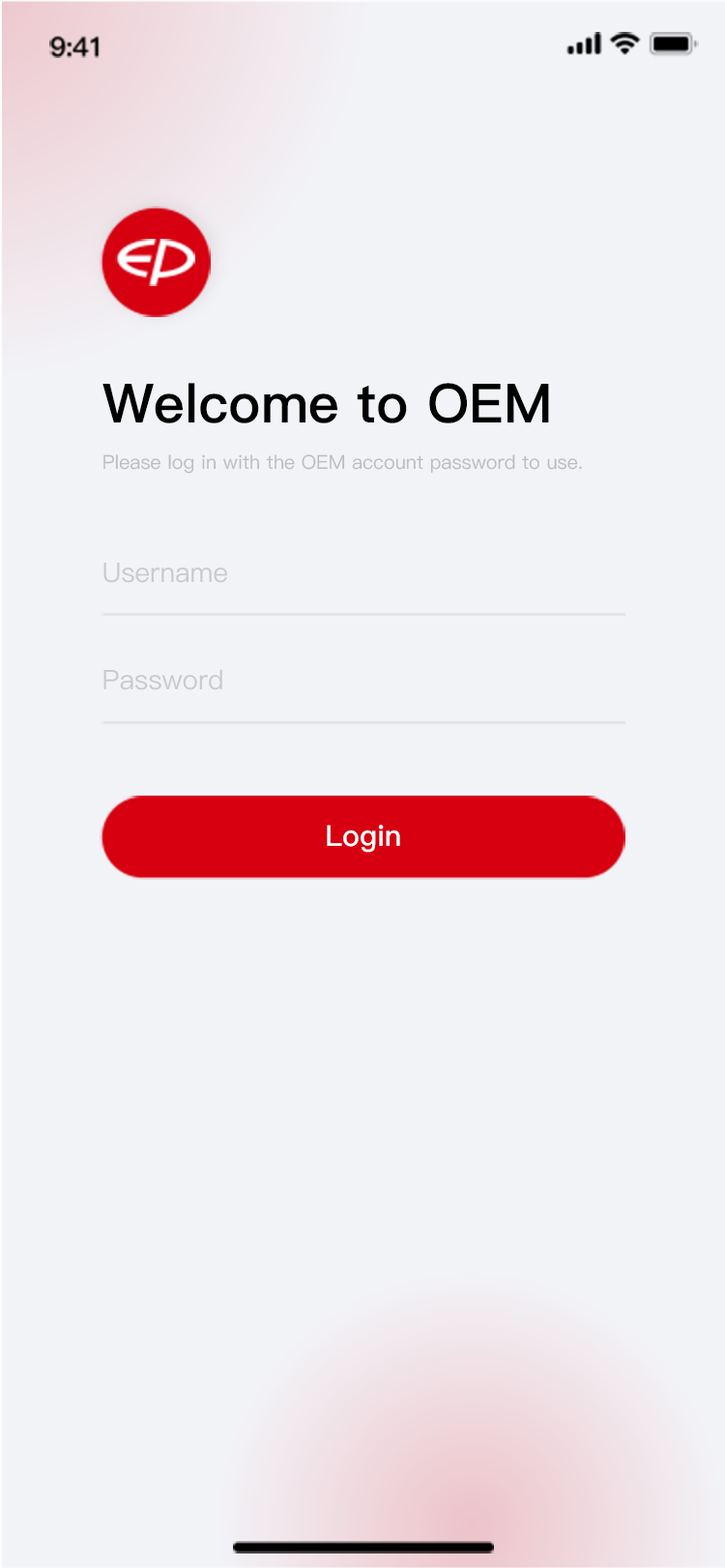
<style>
.page{position:relative;width:725px;height:1568px;background:#f2f3f7}
.page>*{position:absolute;margin:0}
.t1{font:54px "PingFang-SC-Heavy";color:#000000}
.t2{font:19.3px "PingFang-SC-Medium";color:#bdbdbd}
.t3{font:27px "PingFang-SC-Medium";color:#c9cacd}
.t4{font:28.9px "PingFang-SC-Bold";color:#ffffff}
</style>
<div class="page">
<p class="t1" style="left:102px;top:383px;width:447px;height:40px">Welcome to OEM</p>
<p class="t2" style="left:103px;top:454px;width:479px;height:20px">Please log in with the OEM account password to use.</p>
<p class="t3" style="left:103px;top:563px;width:124px;height:20px">Username</p>
<p class="t3" style="left:103px;top:669px;width:119px;height:21px">Password</p>
<p class="t4" style="left:327px;top:825px;width:73px;height:28px">Login</p>
</div>
